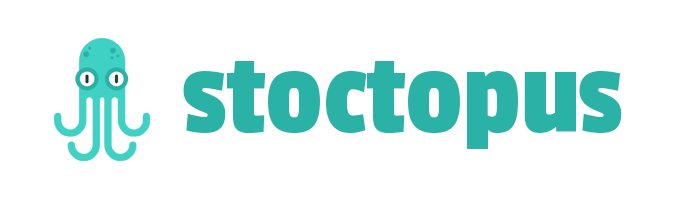
<style>
.page{position:relative;width:688px;height:200px;background:#ffffff}
.page>*{position:absolute;margin:0}
.t1{font:125px "PassionOne-Regular";color:#2bb2a6}
</style>
<div class="page">
<p class="t1" style="left:183px;top:61px;width:439px;height:88px">stoctopus</p>
</div>
